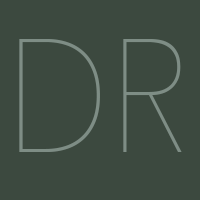
<style>
.page{position:relative;width:200px;height:200px;background:#3c493f}
.page>*{position:absolute;margin:0}
.t1{font:160px "AvenirNext-UltraLight";color:#7e8d85;scale:0.85 1}
</style>
<div class="page">
<p class="t1" style="left:19px;top:39px;width:163px;height:113px">DR</p>
</div>
